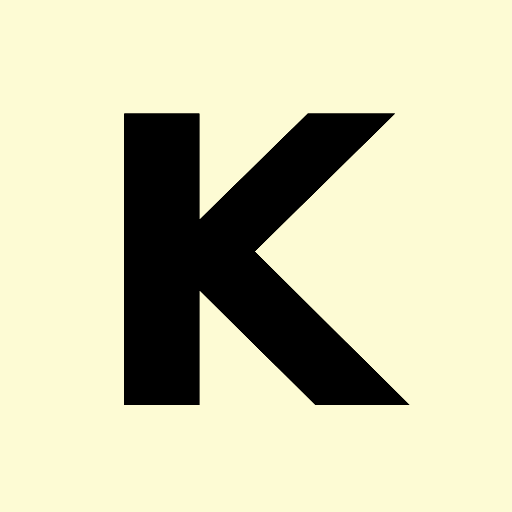
<style>
.page{position:relative;width:512px;height:512px;background:#fdfbd4}
.page>*{position:absolute;margin:0}
.t1{font:400px "DejaVuSans-Bold";color:#000000}
</style>
<div class="page">
<p class="t1" style="left:124px;top:113px;width:286px;height:293px">K</p>
</div>
